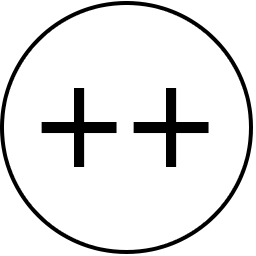
<style>
.page{position:relative;width:256px;height:256px;background:#ffffff}
.page>*{position:absolute;margin:0}
.t1{font:160px "CenturyGothic-Italic";color:#000000;scale:0.95 1}
</style>
<div class="page">
<p class="t1" style="left:41px;top:88px;width:168px;height:79px">++</p>
</div>
